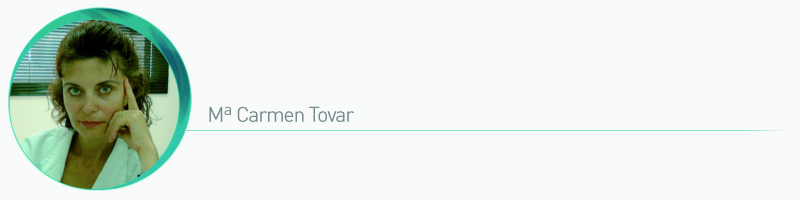
<style>
.page{position:relative;width:800px;height:200px;background:#f9fafa}
.page>*{position:absolute;margin:0}
.t1{font:21px "DIN-Regular";letter-spacing:-0.05em;color:#768d8d}
</style>
<div class="page">
<p class="t1" style="left:209px;top:106px;width:145px;height:16px">Mª Carmen Tovar</p>
</div>
